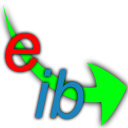
<style>
.page{position:relative;width:128px;height:128px;background:#ffffff}
.page>*{position:absolute;margin:0}
.t1{font:71px "Arial-ItalicMT";color:#ff0000}
.t2{font:67.7px "Arial-ItalicMT";color:#1986bf}
</style>
<div class="page">
<p class="t1" style="left:5px;top:33px;width:35px;height:39px">e</p>
<p class="t2" style="left:35px;top:69px;width:49px;height:50px">ib</p>
</div>
